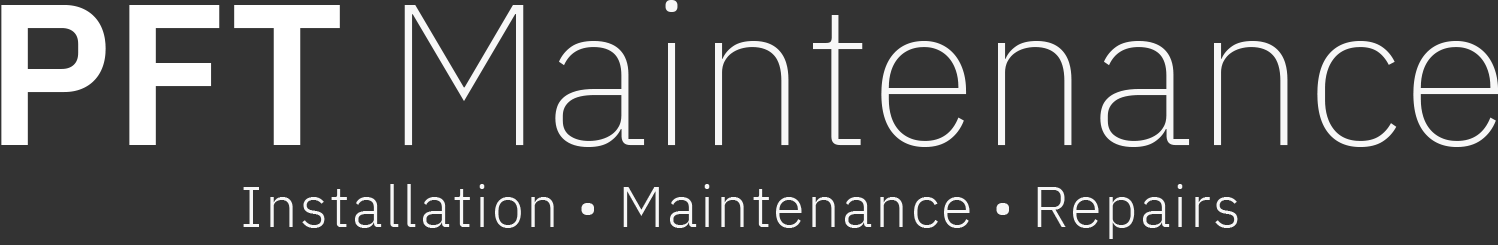
<style>
.page{position:relative;width:1498px;height:245px;background:#333333}
.page>*{position:absolute;margin:0}
.t1{font:200px "IBMPlexSans-SemiBold";color:#ffffff}
.t2{font:200px "IBMPlexSans-ExtraLight";color:#f7f7f7}
.t3{font:58.3px "IBMPlexSans-Light";letter-spacing:0.04em;color:#f7f7f7}
</style>
<div class="page">
<p class="t1" style="left:1px;top:5px;width:339px;height:140px">PFT</p>
<p class="t2" style="left:404px;top:0px;width:1094px;height:147px">Maintenance</p>
<p class="t3" style="left:243px;top:184px;width:995px;height:55px">Installation • Maintenance • Repairs</p>
</div>
